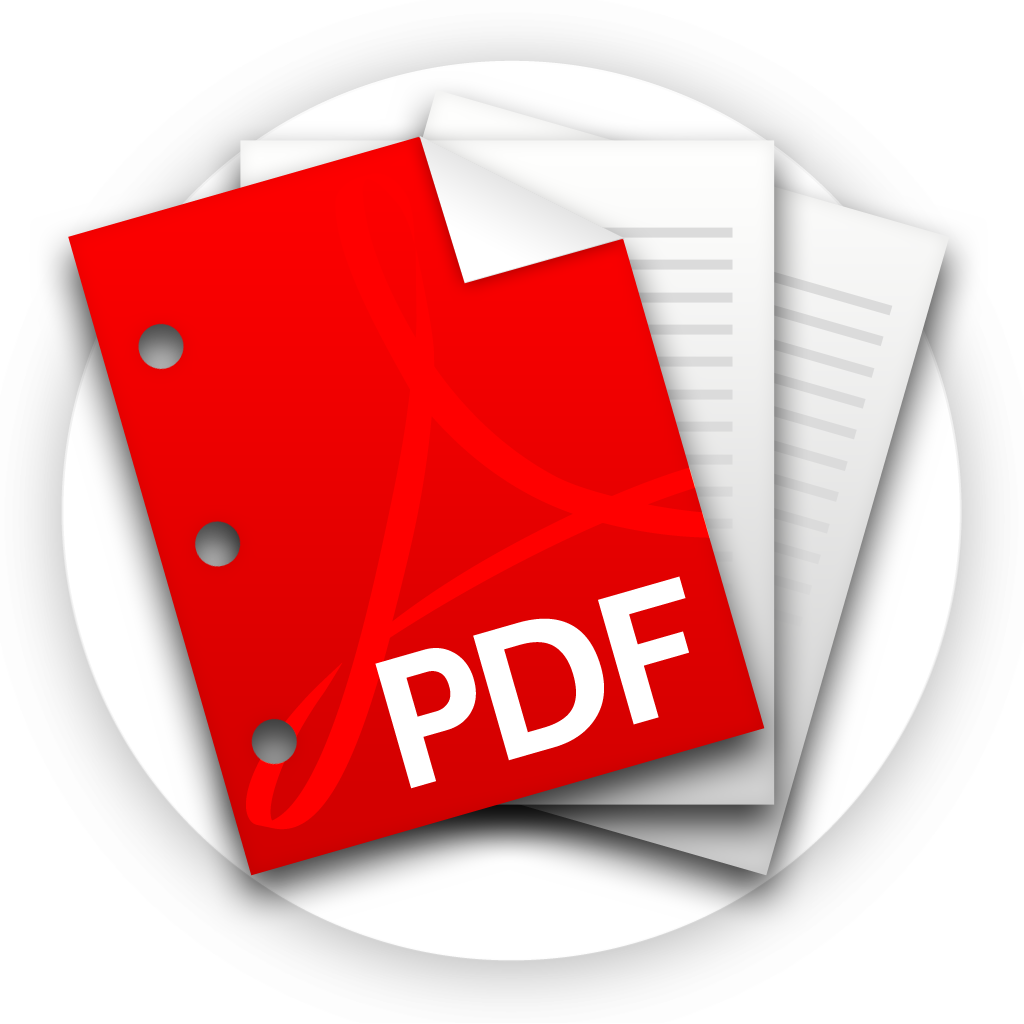
<style>
.page{position:relative;width:1024px;height:1024px;background:#ffffff}
.page>*{position:absolute;margin:0}
.t1{font:180px "PreludeWGL-Bold";letter-spacing:-0.06em;color:#ffffff}
</style>
<div class="page">
<p class="t1" style="left:375px;top:576px;width:314px;height:213px;rotate:-16deg">PDF</p>
</div>
